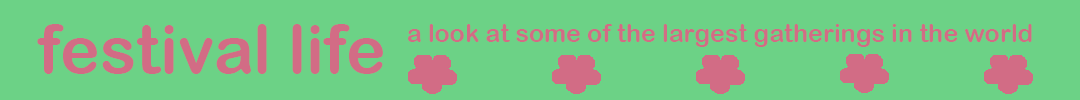
<style>
.page{position:relative;width:1080px;height:100px;background:#6cd286}
.page>*{position:absolute;margin:0}
.t1{font:66.7px "ArialRoundedMTBold";color:#d26c85}
.t2{font:25px "ArialRoundedMTBold";color:#d26c85}
</style>
<div class="page">
<p class="t1" style="left:37px;top:24px;width:346px;height:50px">festival life</p>
<p class="t2" style="left:408px;top:24px;width:624px;height:23px">a look at some of the largest gatherings in the world</p>
</div>
